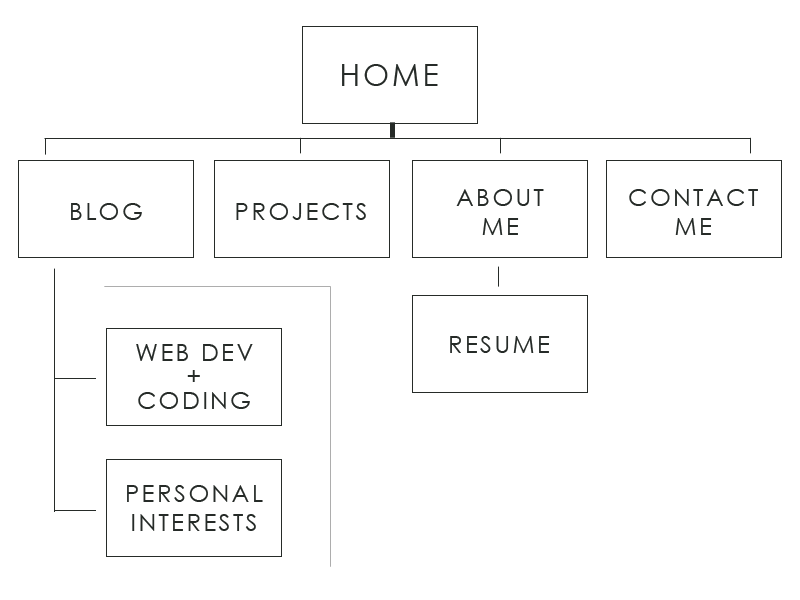
<style>
.page{position:relative;width:800px;height:600px;background:#ffffff}
.page>*{position:absolute;margin:0}
.t1{font:30px "CenturyGothic";letter-spacing:0.1em;color:#262b28;text-transform:uppercase}
.t2{font:24px "CenturyGothic";letter-spacing:0.1em;color:#262b28;text-transform:uppercase}
.t3{font:24px/24px "CenturyGothic";letter-spacing:0.1em;color:#262b28;text-transform:uppercase}
</style>
<div class="page">
<p class="t1" style="left:342px;top:64px;width:96px;height:22px">HOME</p>
<p class="t2" style="left:456px;top:189px;width:88px;height:46px;text-align:center">About<br>me</p>
<p class="t2" style="left:629px;top:189px;width:129px;height:46px;text-align:center">Contact<br>Me</p>
<p class="t2" style="left:71px;top:203px;width:71px;height:17px">Blog</p>
<p class="t2" style="left:236px;top:203px;width:130px;height:17px">Projects</p>
<p class="t2" style="left:450px;top:336px;width:100px;height:17px">resume</p>
<p class="t3" style="left:136px;top:344px;width:117px;height:65px;text-align:center">web dev<br>+<br>Coding</p>
<p class="t2" style="left:127px;top:485px;width:136px;height:46px;text-align:center">personal<br>interests</p>
</div>
